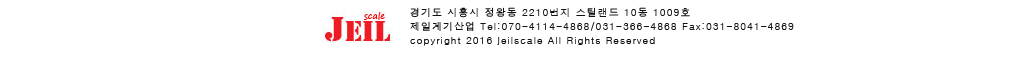
<style>
.page{position:relative;width:1020px;height:60px;background:#ffffff}
.page>*{position:absolute;margin:0}
.t1{font:10px/14px "Dotum";letter-spacing:0.1em;color:#111111}
</style>
<div class="page">
<p class="t1" style="left:410px;top:7px;width:384px;height:39px">경기도 시흥시 정왕동 2210번지 스틸랜드 10동 1009호<br>제일계기산업 Tel:070-4114-4868/031-366-4868 Fax:031-8041-4869<br>copyright 2016 jeilscale All Rights Reserved</p>
</div>
